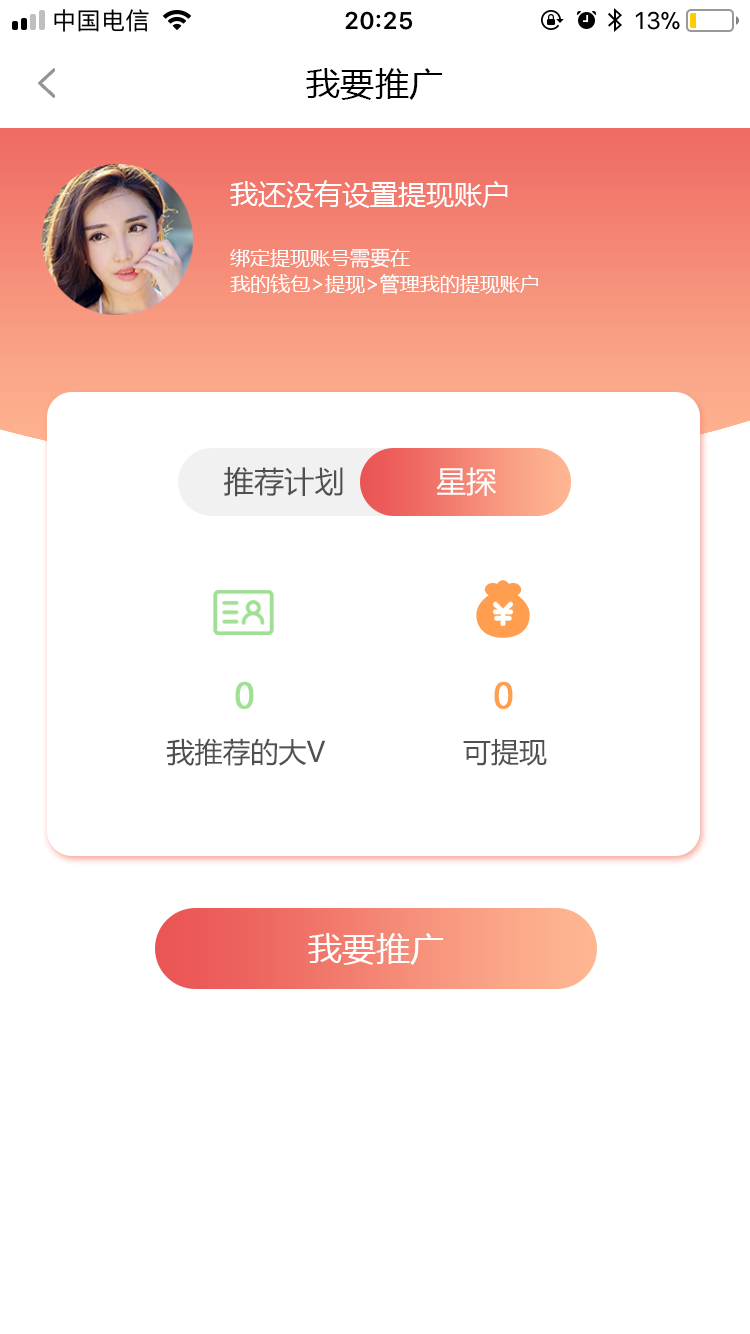
<style>
.page{position:relative;width:750px;height:1334px;background:#ffffff}
.page>*{position:absolute;margin:0}
.t1{font:34px "MicrosoftYaHei";letter-spacing:0.01em;color:#000000}
.t2{font:28px "MicrosoftYaHei";color:#ffffff}
.t3{font:20px "MicrosoftYaHei";color:#ffffff}
.t4{font:29.7px "MicrosoftYaHei";color:#505050}
.t5{font:30px "MicrosoftYaHei";color:#ffffff}
.t6{font:34.1px "MicrosoftYaHei";color:#9fe094;font-weight:bold}
.t7{font:34.1px "MicrosoftYaHei";color:#ff9e4f;font-weight:bold}
.t8{font:28.1px "MicrosoftYaHei";color:#505050}
.t9{font:34px "MicrosoftYaHei";color:#ffffff}
</style>
<div class="page">
<p class="t1" style="left:306px;top:68px;width:137px;height:32px">我要推广</p>
<p class="t2" style="left:230px;top:180px;width:278px;height:28px">我还没有设置提现账户</p>
<p class="t3" style="left:230px;top:248px;width:180px;height:20px">绑定提现账号需要在</p>
<p class="t3" style="left:230px;top:274px;width:308px;height:20px">我的钱包&gt;提现&gt;管理我的提现账户</p>
<p class="t4" style="left:224px;top:467px;width:119px;height:30px">推荐计划</p>
<p class="t5" style="left:436px;top:467px;width:61px;height:29px">星探</p>
<p class="t6" style="left:235px;top:681px;width:19px;height:28px">0</p>
<p class="t7" style="left:494px;top:681px;width:19px;height:28px">0</p>
<p class="t8" style="left:166px;top:738px;width:160px;height:28px">我推荐的大V</p>
<p class="t8" style="left:463px;top:739px;width:84px;height:27px">可提现</p>
<p class="t9" style="left:308px;top:933px;width:136px;height:32px">我要推广</p>
</div>
